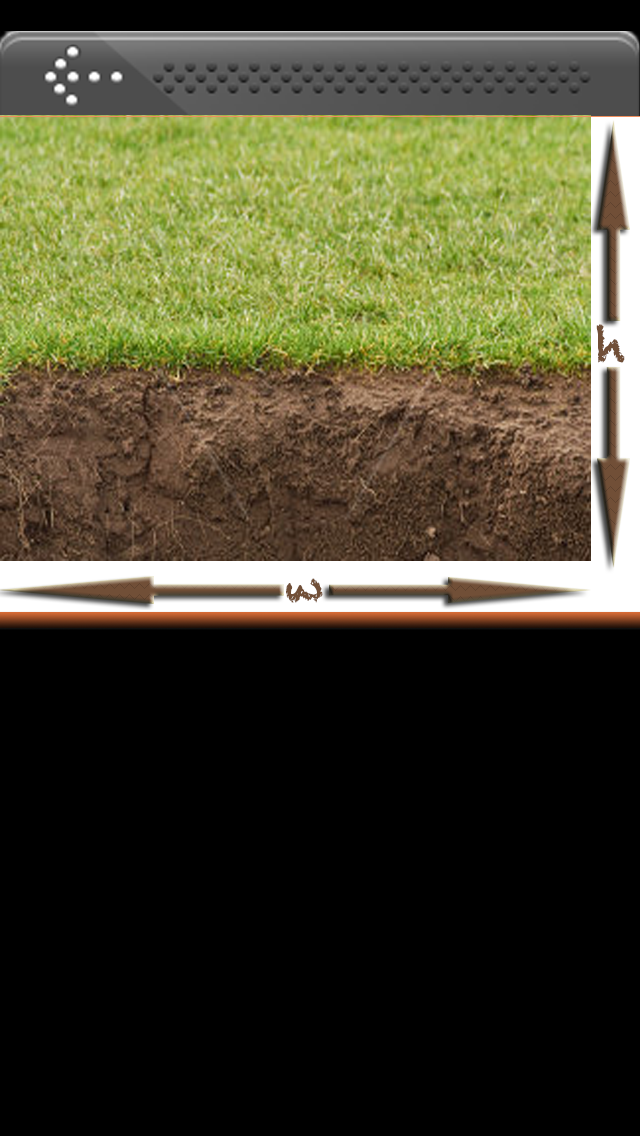
<style>
.page{position:relative;width:640px;height:1136px;background:#000000}
.page>*{position:absolute;margin:0}
.t1{font:48px "Chalkduster";color:#714f37}
</style>
<div class="page">
<p class="t1" style="left:596px;top:324px;width:29px;height:39px">h</p>
<p class="t1" style="left:286px;top:578px;width:37px;height:25px">w</p>
</div>
